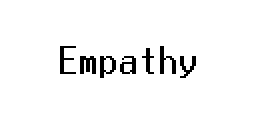
<style>
.page{position:relative;width:256px;height:128px;background:#ffffff}
.page>*{position:absolute;margin:0}
.t1{font:36px "Terminal";color:#000000}
</style>
<div class="page">
<p class="t1" style="left:60px;top:46px;width:136px;height:32px">Empathy</p>
</div>
